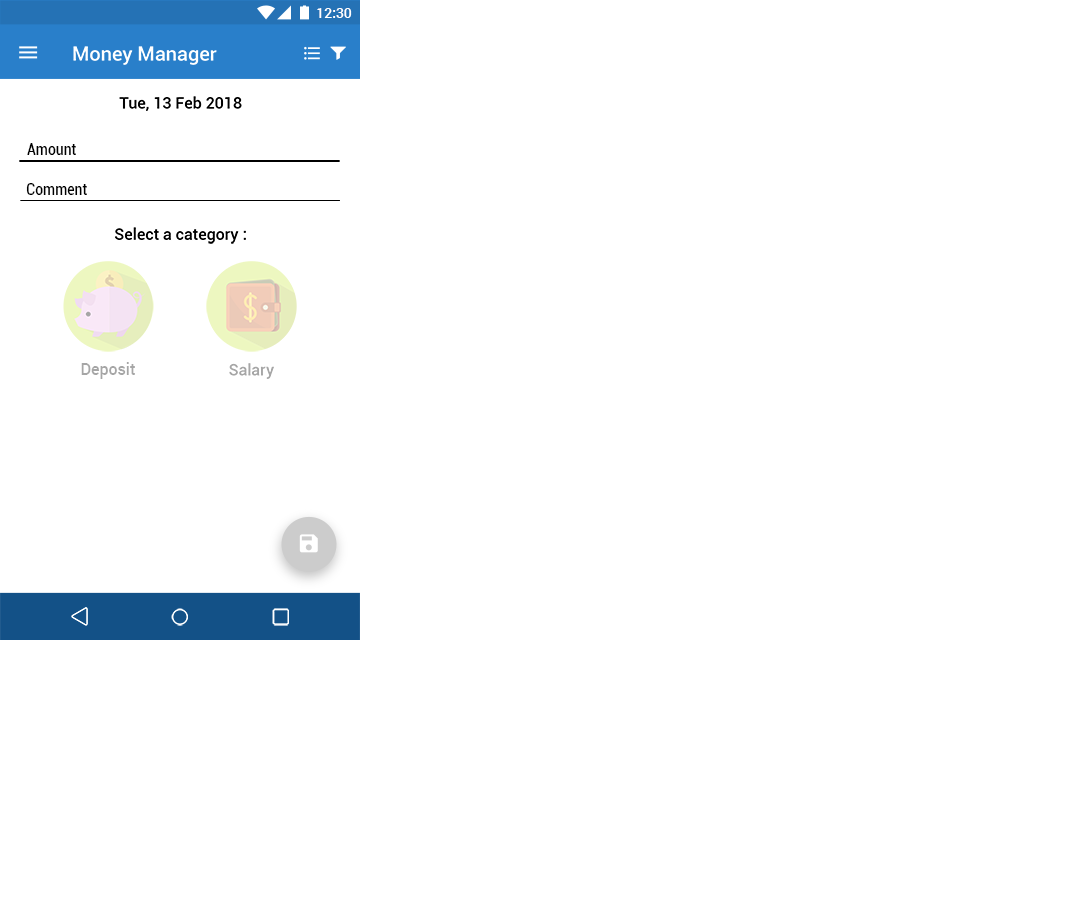
<style>
.page{position:relative;width:1080px;height:900px;background:#ffffff}
.page>*{position:absolute;margin:0}
.t1{font:14px "Roboto-Medium";color:#ffffff}
.t2{font:20px "Roboto-Medium";color:#ffffff}
.t3{font:16px "Roboto-Medium";color:#000000}
.t4{font:16px "Roboto-Condensed";color:#000000}
.t5{font:16px "Roboto-Medium";color:#a6a6a6}
</style>
<div class="page">
<p class="t1" style="left:317px;top:8px;width:35px;height:10px">12:30</p>
<p class="t2" style="left:73px;top:46px;width:144px;height:19px">Money Manager</p>
<p class="t3" style="left:119px;top:96px;width:123px;height:15px">Тue, 13 Feb 2018</p>
<p class="t4" style="left:27px;top:143px;width:49px;height:12px">Amount</p>
<p class="t4" style="left:26px;top:183px;width:61px;height:12px">Comment</p>
<p class="t3" style="left:115px;top:227px;width:131px;height:17px">Select a category :</p>
<p class="t5" style="left:81px;top:362px;width:54px;height:17px">Deposit</p>
<p class="t5" style="left:229px;top:363px;width:45px;height:16px">Salary</p>
</div>
